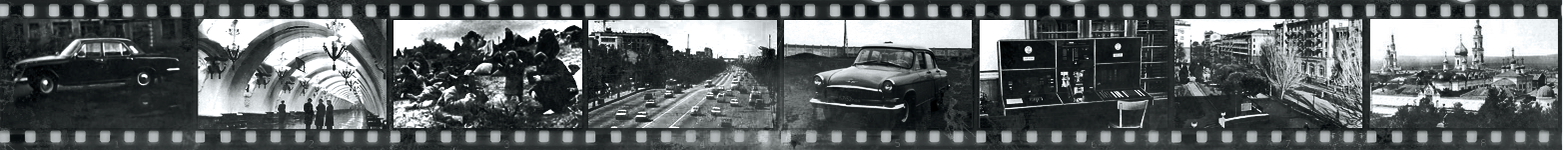
<style>
.page{position:relative;width:1568px;height:150px}
.page>*{position:absolute;margin:0}
.t1{font:12px "Courier";text-transform:uppercase}
</style>
<div class="page">
<p class="t1" style="left:115px;top:140px;width:4px;height:8px">1</p>
<p class="t1" style="left:309px;top:140px;width:5px;height:8px">2</p>
<p class="t1" style="left:504px;top:140px;width:5px;height:8px">3</p>
<p class="t1" style="left:700px;top:140px;width:5px;height:8px">4</p>
<p class="t1" style="left:895px;top:139px;width:5px;height:8px">5</p>
<p class="t1" style="left:1092px;top:140px;width:5px;height:8px">6</p>
<p class="t1" style="left:1285px;top:140px;width:5px;height:8px">7</p>
<p class="t1" style="left:1481px;top:139px;width:5px;height:8px">8</p>
</div>
